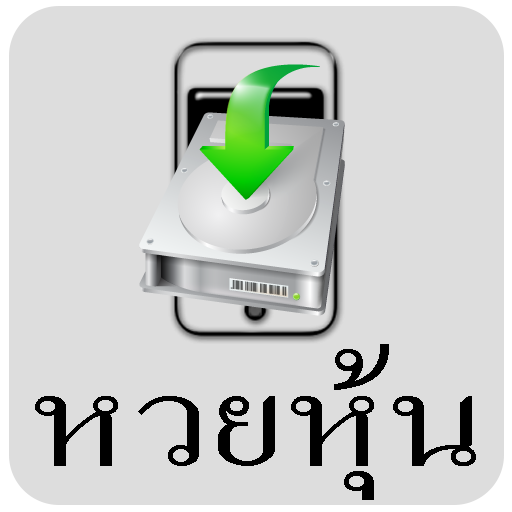
<style>
.page{position:relative;width:512px;height:512px;background:#dddddd}
.page>*{position:absolute;margin:0}
.t1{font:174.3px "AngsanaNew";color:#000000;scale:1.26 1}
</style>
<div class="page">
<p class="t1" style="left:35px;top:344px;width:441px;height:156px">หวยหุ้น</p>
</div>
